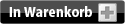
<style>
.page{position:relative;width:125px;height:24px;background:#4d4d4d}
.page>*{position:absolute;margin:0}
.t1{font:13px "KozGoPro-Heavy";color:#fefefe}
</style>
<div class="page">
<p class="t1" style="left:9px;top:6px;width:83px;height:11px">In Warenkorb</p>
</div>
